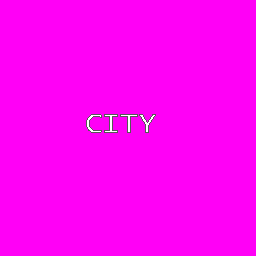
<style>
.page{position:relative;width:256px;height:256px;background:#ff00f6}
.page>*{position:absolute;margin:0}
.t1{font:30px "LucidaConsole";letter-spacing:0.02em;color:#ffffff;scale:0.95 1}
</style>
<div class="page">
<p class="t1" style="left:86px;top:114px;width:70px;height:19px">CITY</p>
</div>
